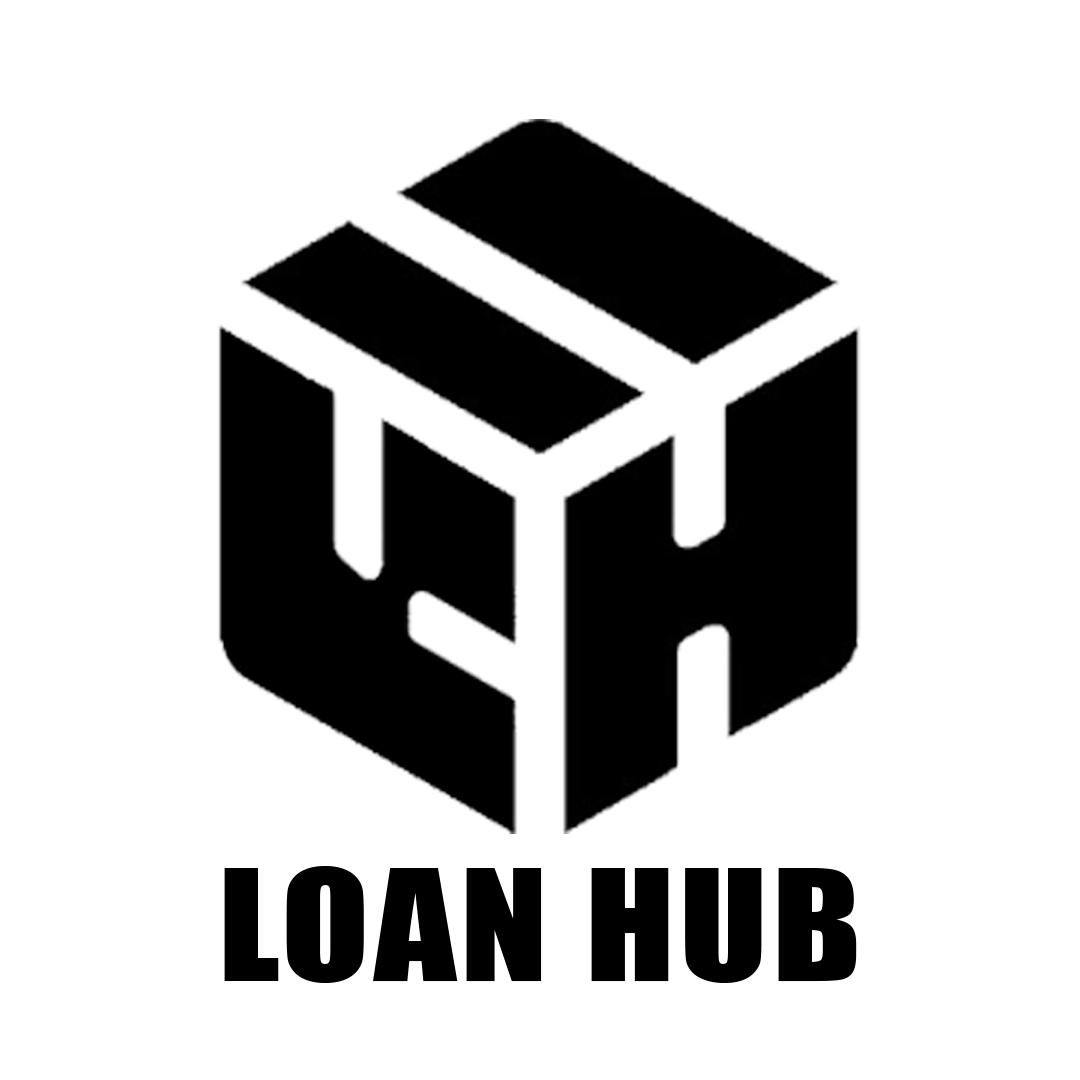
<style>
.page{position:relative;width:1080px;height:1080px;background:#ffffff}
.page>*{position:absolute;margin:0}
.t1{font:143.2px "Impact";letter-spacing:0.025em;color:#000000;scale:1.13 1}
</style>
<div class="page">
<p class="t1" style="left:224px;top:866px;width:633px;height:117px">LOAN HUB</p>
</div>
